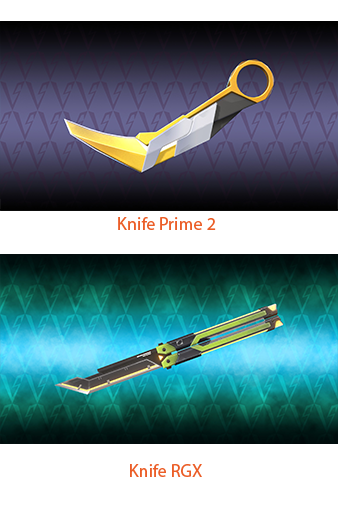
<style>
.page{position:relative;width:338px;height:507px;background:#ffffff}
.page>*{position:absolute;margin:0}
.t1{font:18px "MyriadPro-Regular";color:#eb5e28}
</style>
<div class="page">
<p class="t1" style="left:118px;top:217px;width:98px;height:13px">Knife Prime 2</p>
<p class="t1" style="left:130px;top:464px;width:72px;height:13px">Knife RGX</p>
</div>
